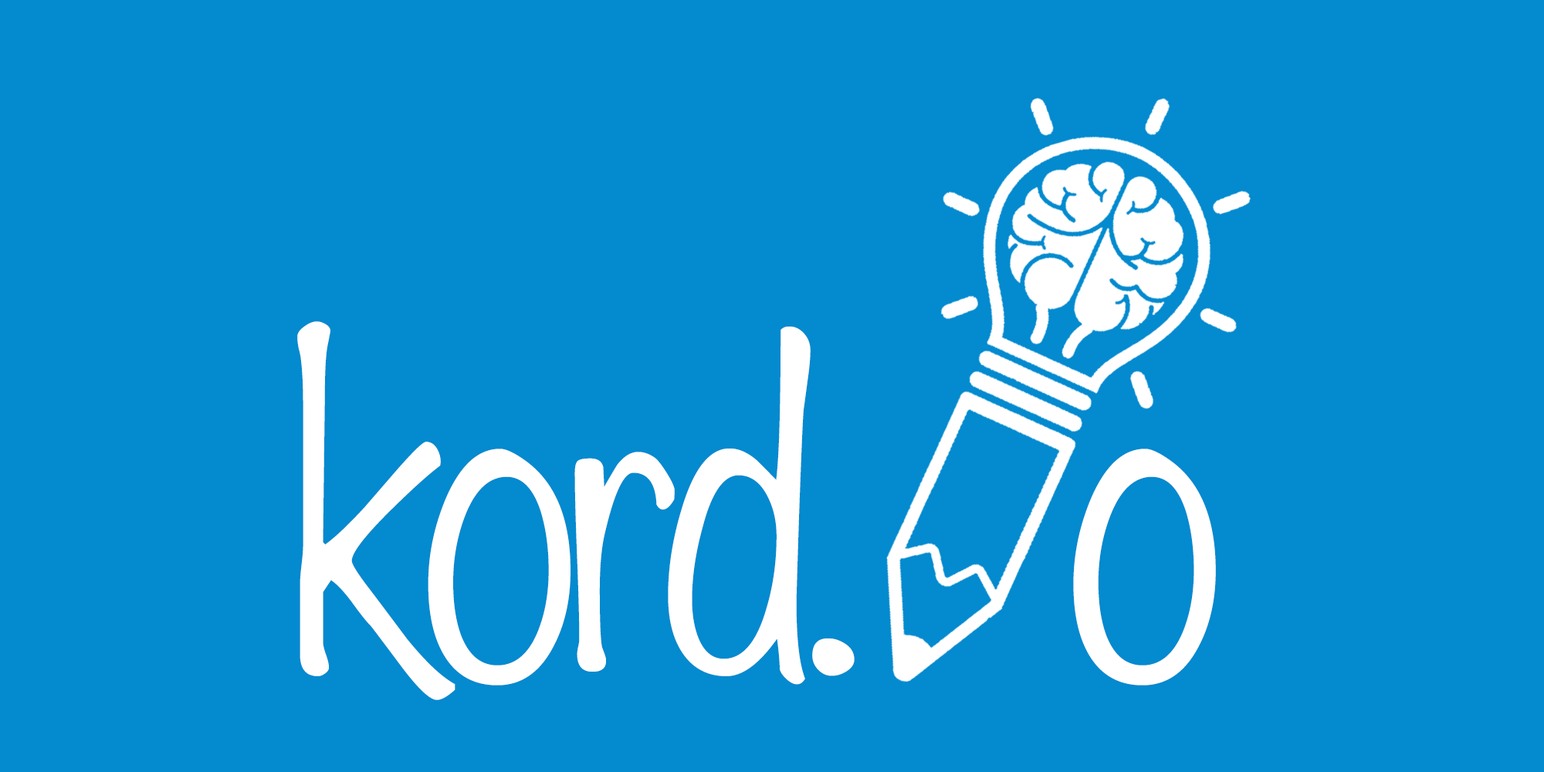
<style>
.page{position:relative;width:1544px;height:772px;background:#038acf}
.page>*{position:absolute;margin:0}
.t1{font:403.1px "Noteworthy-Light";letter-spacing:-0.05em;color:#ffffff;scale:0.89 1}
</style>
<div class="page">
<p class="t1" style="left:297px;top:321px;width:919px;height:379px">kord.           o</p>
</div>
